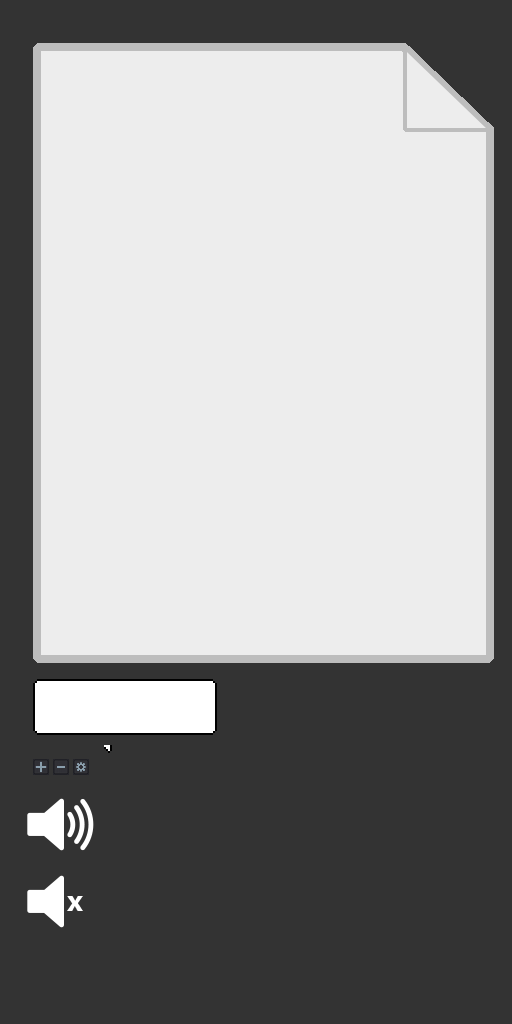
<style>
.page{position:relative;width:512px;height:1024px;background:#ededed}
.page>*{position:absolute;margin:0}
.t1{font:30px "MyriadHebrew-Bold";color:#ffffff;scale:1.04 1}
</style>
<div class="page">
<p class="t1" style="left:67px;top:896px;width:16px;height:15px">x</p>
</div>
